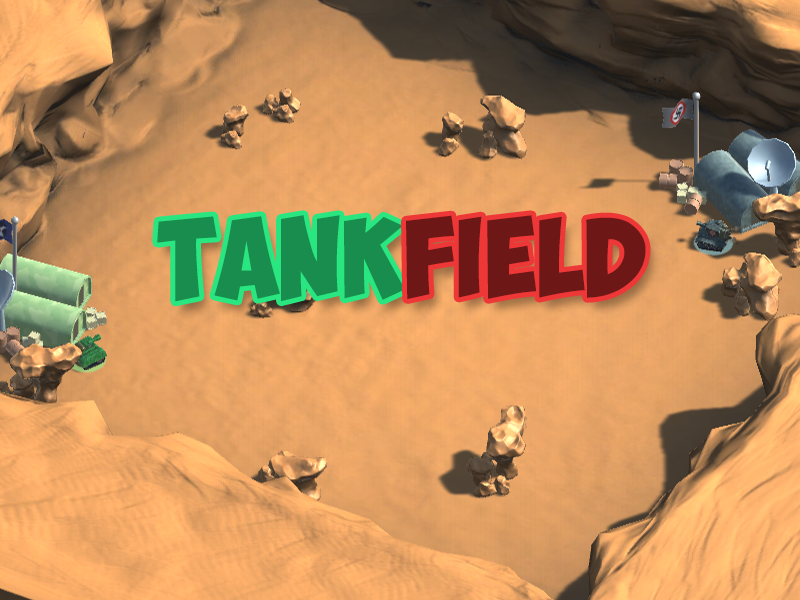
<style>
.page{position:relative;width:800px;height:600px}
.page>*{position:absolute;margin:0}
.t1{font:80px "ObelixPro";color:#188d4e}
.t2{font:80px "ObelixPro";color:#6d1717}
</style>
<div class="page">
<p class="t1" style="left:157px;top:215px;width:248px;height:87px">Tank</p>
<p class="t2" style="left:406px;top:215px;width:240px;height:84px">FIELD</p>
</div>
